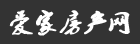
<style>
.page{position:relative;width:140px;height:44px;background:#333333}
.page>*{position:absolute;margin:0}
.t1{font:24px "2.0-";color:#ffffff;font-weight:bold}
</style>
<div class="page">
<p class="t1" style="left:9px;top:10px;width:121px;height:26px">爱家房产网</p>
</div>
